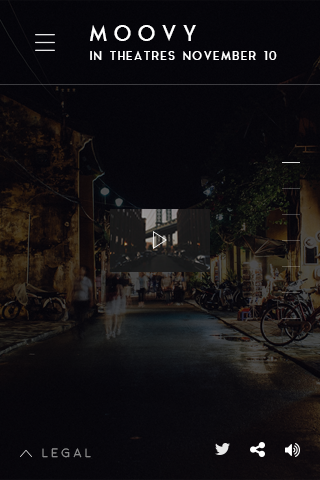
<style>
.page{position:relative;width:320px;height:480px}
.page>*{position:absolute;margin:0}
.t1{font:22px "AquaGrotesque";letter-spacing:0.2em;color:#ffffff;text-transform:uppercase}
.t2{font:12px "AquaGrotesque";letter-spacing:0.05em;color:#ffffff;text-transform:uppercase}
.t3{font:12px "Moon-Light";letter-spacing:0.3em;text-transform:uppercase}
</style>
<div class="page">
<p class="t1" style="left:90px;top:25px;width:106px;height:16px">moovy</p>
<p class="t2" style="left:90px;top:51px;width:187px;height:9px">IN THEATRES NoveMBER 10</p>
<p class="t3" style="left:42px;top:448px;width:49px;height:10px">legal</p>
</div>
